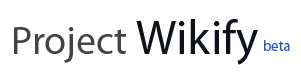
<style>
.page{position:relative;width:301px;height:73px;background:#ffffff}
.page>*{position:absolute;margin:0}
.t1{font:40px "MyriadPro-Regular";color:#434343}
.t2{font:48px "MyriadPro-Regular";color:#0f121a}
.t3{font:14.7px "MyriadPro-Regular";color:#265cc8}
</style>
<div class="page">
<p class="t1" style="left:14px;top:19px;width:244px;height:46px">Project<span class="t2"> Wikify</span></p>
<p class="t3" style="left:264px;top:40px;width:26px;height:11px">beta</p>
</div>
